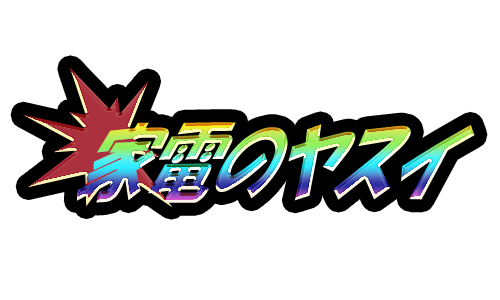
<style>
.page{position:relative;width:500px;height:300px;background:#ffffff}
.page>*{position:absolute;margin:0}
.t1{font:95.2px "HGPSoeiKakupoptai";letter-spacing:-0.013em;scale:0.71 1}
</style>
<div class="page">
<p class="t1" style="left:76px;top:122px;width:399px;height:81px">家電のヤスイ</p>
</div>
